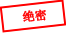
<style>
.page{position:relative;width:66px;height:33px;background:#ffffff}
.page>*{position:absolute;margin:0}
.t1{font:12px "SimSun";color:#fe0000;font-weight:bold}
</style>
<div class="page">
<p class="t1" style="left:22px;top:9px;width:24px;height:13px;rotate:-6deg">绝密</p>
</div>
